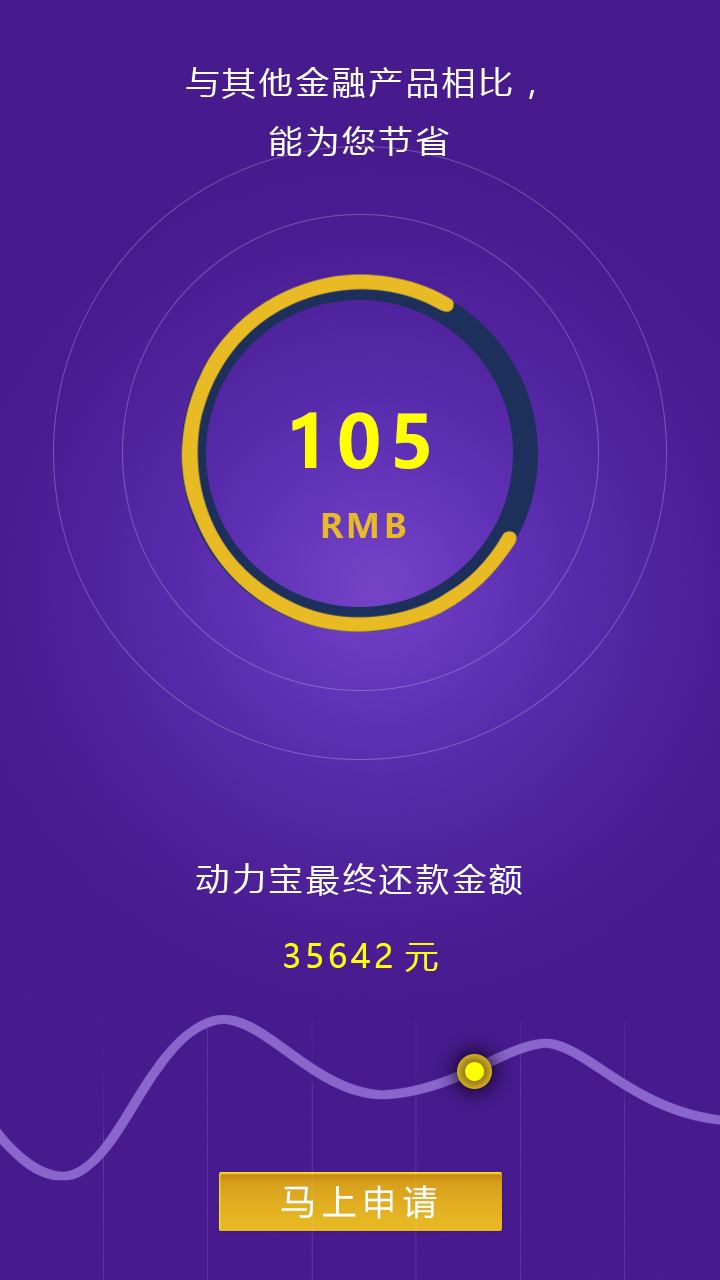
<style>
.page{position:relative;width:720px;height:1280px}
.page>*{position:absolute;margin:0}
.t1{font:33.3px "MicrosoftYaHei";letter-spacing:0.1em;color:#ffffff}
.t2{font:71.9px "MicrosoftYaHei-Bold";letter-spacing:0.1em;color:#ffff00}
.t3{font:33.3px "MicrosoftYaHei-Bold";letter-spacing:0.1em;color:#e8ba24}
.t4{font:33.3px "MicrosoftYaHei";letter-spacing:0.1em;color:#ffff00}
.t5{font:34.4px "MicrosoftYaHei";letter-spacing:0.2em;color:#feffff}
</style>
<div class="page">
<p class="t1" style="left:186px;top:67px;width:349px;height:90px;text-align:center">与其他金融产品相比，<br>能为您节省</p>
<p class="t2" style="left:292px;top:412px;width:137px;height:57px">105</p>
<p class="t3" style="left:322px;top:513px;width:84px;height:25px">RMB</p>
<p class="t1" style="left:196px;top:863px;width:326px;height:33px">动力宝最终还款金额</p>
<p class="t4" style="left:284px;top:943px;width:154px;height:29px">35642元</p>
<p class="t5" style="left:281px;top:1185px;width:156px;height:34px">马上申请</p>
</div>
